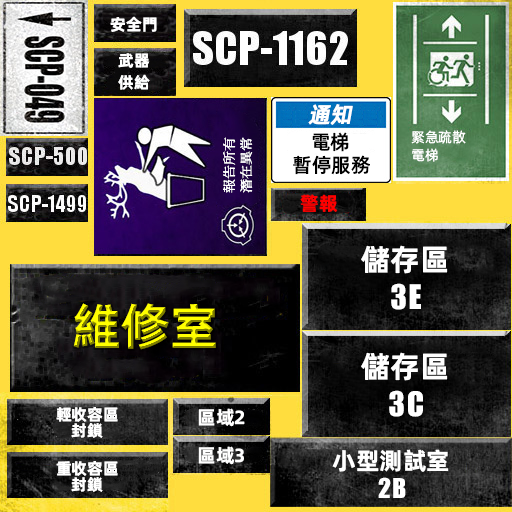
<style>
.page{position:relative;width:512px;height:512px}
.page>*{position:absolute;margin:0}
.t1{font:16px "AlibabaPuHuiTiB";color:#ffffff}
.t2{font:16px/22px "AlibabaPuHuiTiB";color:#ffffff}
.t3{font:22px "AlibabaPuHuiTiM";color:#ffffff;font-weight:bold;font-style:italic}
.t4{font:12.8px/16.5px "ContainmentBreach-Regular";color:#ffffff;scale:1.09 1}
.t5{font:20px "AlibabaPuHuiTiM";color:#000000}
.t6{font:14px/18px "AlibabaPuHuiTiR";color:#ffffff}
.t7{font:19px "AlibabaPuHuiTiB";color:#ff0000}
.t8{font:30px/33px "AlibabaPuHuiTiB";color:#ffffff}
.t9{font:37px/33px "URWImpactW01-Bold";color:#ffffff}
.t10{font:50px "AlibabaPuHuiTiB"}
.t11{font:16px/16px "AlibabaPuHuiTiB";color:#ffffff}
.t12{font:19px "AlibabaPuHuiTiB";color:#ffffff}
.t13{font:24px/24px "AlibabaPuHuiTiB";color:#ffffff}
.t14{font:30px/24px "URWImpactW01-Bold";color:#ffffff}
</style>
<div class="page">
<p class="t1" style="left:110px;top:16px;width:47px;height:16px">安全門</p>
<p class="t2" style="left:118px;top:53px;width:32px;height:37px;text-align:center">武器<br>供給</p>
<p class="t3" style="left:308px;top:104px;width:45px;height:21px">通知</p>
<p class="t4" style="left:223px;top:137px;width:30px;height:56px;rotate:-90deg">報告所有<br>潛在異常</p>
<p class="t5" style="left:312px;top:132px;width:37px;height:20px">電梯</p>
<p class="t6" style="left:411px;top:130px;width:55px;height:32px">緊急疏散<br>電梯</p>
<p class="t5" style="left:293px;top:155px;width:77px;height:20px">暫停服務</p>
<p class="t7" style="left:300px;top:194px;width:38px;height:18px">警報</p>
<p class="t8" style="left:361px;top:245px;width:87px;height:65px;text-align:center">儲存區<br><span class="t9">3E</span></p>
<p class="t10" style="left:73px;top:303px;width:143px;height:47px">維修室</p>
<p class="t8" style="left:361px;top:352px;width:87px;height:65px;text-align:center">儲存區<br><span class="t9">3C</span></p>
<p class="t11" style="left:56px;top:407px;width:62px;height:31px;text-align:center">輕收容區<br>封鎖</p>
<p class="t12" style="left:198px;top:408px;width:47px;height:19px">區域2</p>
<p class="t12" style="left:198px;top:446px;width:46px;height:19px">區域3</p>
<p class="t13" style="left:332px;top:449px;width:117px;height:49px;text-align:center">小型測試室<br><span class="t14">2B</span></p>
<p class="t11" style="left:56px;top:461px;width:62px;height:31px;text-align:center">重收容區<br>封鎖</p>
</div>
